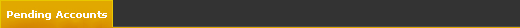
<style>
.page{position:relative;width:520px;height:28px;background:#333333}
.page>*{position:absolute;margin:0}
.t1{font:10px "Verdana-Bold";color:#ffffff}
</style>
<div class="page">
<p class="t1" style="left:7px;top:10px;width:100px;height:10px">Pending Accounts</p>
</div>
